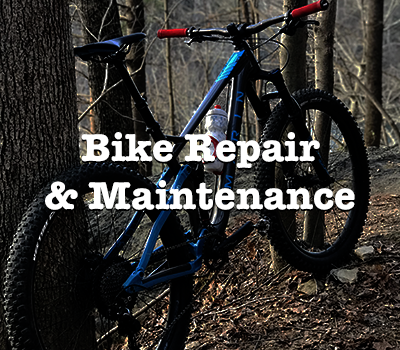
<style>
.page{position:relative;width:400px;height:350px}
.page>*{position:absolute;margin:0}
.t1{font:40px "AmericanTypewriter-Bold";color:#ffffff}
</style>
<div class="page">
<p class="t1" style="left:45px;top:134px;width:310px;height:78px;text-align:center">Bike Repair<br>&amp; Maintenance</p>
<p class="t1" style="left:45px;top:132px;width:310px;height:78px;text-align:center">Bike Repair<br>&amp; Maintenance</p>
</div>
